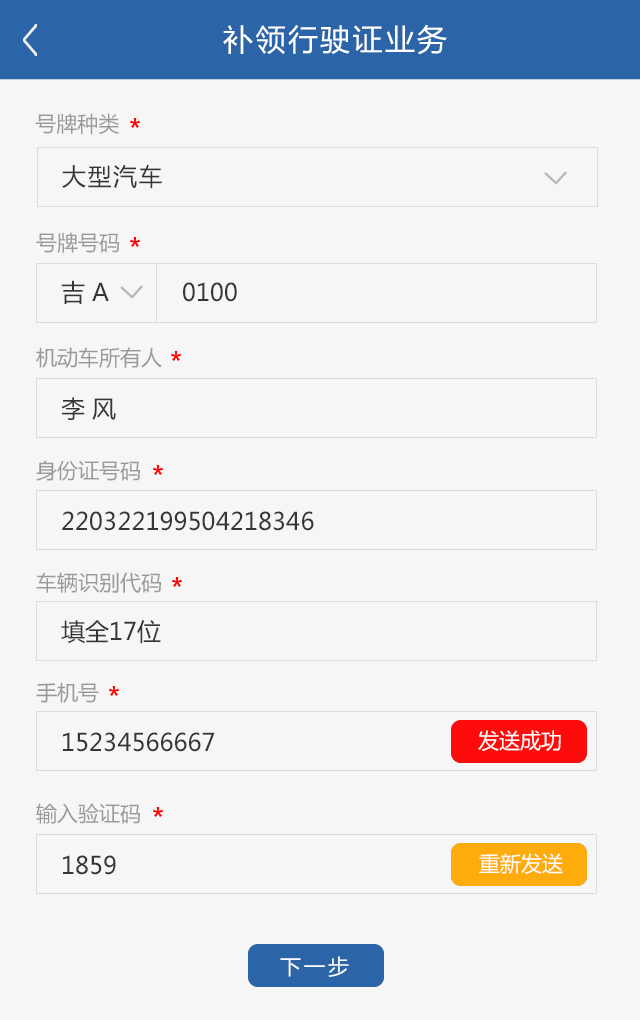
<style>
.page{position:relative;width:640px;height:1020px;background:#f6f6f6}
.page>*{position:absolute;margin:0}
.t1{font:30px "MicrosoftYaHei";letter-spacing:0.08em;color:#ffffff}
.t2{font:21px "MicrosoftYaHei";color:#999999}
.t3{font:24px "MicrosoftYaHei";letter-spacing:0.06em;color:#353535}
.t4{font:24px "MicrosoftYaHei";color:#353535}
.t5{font:21px "MicrosoftYaHei";color:#ffffff}
.t6{font:21px "MicrosoftYaHei";letter-spacing:0.14em;color:#ffffff}
</style>
<div class="page">
<p class="t1" style="left:223px;top:24px;width:224px;height:31px">补领行驶证业务</p>
<p class="t2" style="left:35px;top:113px;width:84px;height:21px">号牌种类</p>
<p class="t3" style="left:62px;top:164px;width:100px;height:25px">大型汽车</p>
<p class="t2" style="left:36px;top:232px;width:83px;height:21px">号牌号码</p>
<p class="t4" style="left:61px;top:280px;width:48px;height:24px">吉 A</p>
<p class="t4" style="left:183px;top:282px;width:54px;height:20px">0100</p>
<p class="t2" style="left:36px;top:347px;width:126px;height:21px">机动车所有人</p>
<p class="t4" style="left:61px;top:397px;width:55px;height:23px">李 风</p>
<p class="t2" style="left:36px;top:460px;width:104px;height:21px">身份证号码</p>
<p class="t4" style="left:62px;top:511px;width:252px;height:20px">220322199504218346</p>
<p class="t2" style="left:36px;top:572px;width:125px;height:21px">车辆识别代码</p>
<p class="t4" style="left:61px;top:620px;width:100px;height:24px">填全17位</p>
<p class="t2" style="left:36px;top:682px;width:63px;height:21px">手机号</p>
<p class="t4" style="left:63px;top:732px;width:152px;height:20px">15234566667</p>
<p class="t5" style="left:478px;top:730px;width:83px;height:21px">发送成功</p>
<p class="t2" style="left:36px;top:803px;width:104px;height:21px">输入验证码</p>
<p class="t4" style="left:63px;top:855px;width:53px;height:20px">1859</p>
<p class="t5" style="left:479px;top:853px;width:84px;height:21px">重新发送</p>
<p class="t6" style="left:280px;top:956px;width:69px;height:21px">下一步</p>
</div>
